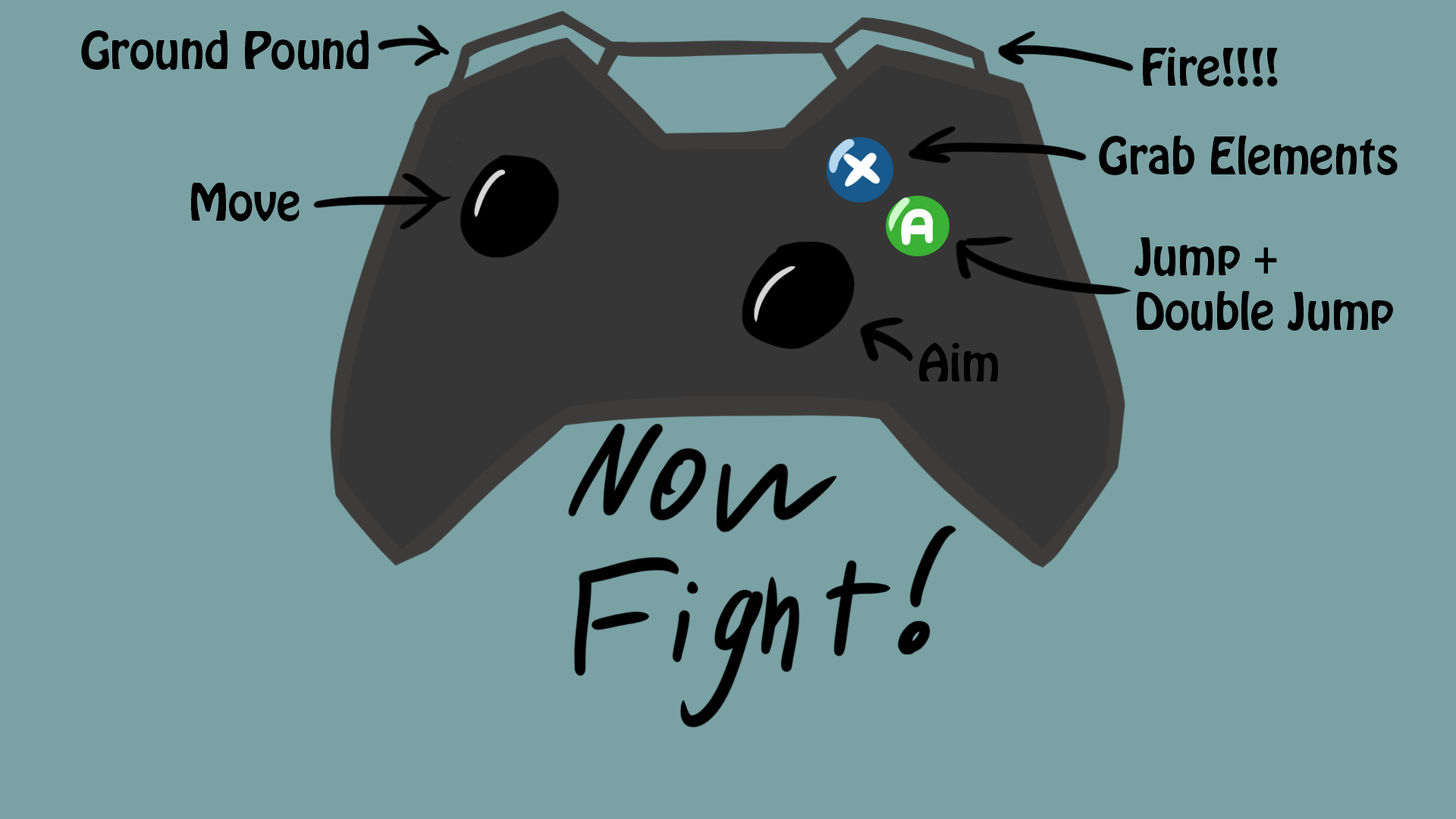
<style>
.page{position:relative;width:1456px;height:819px;background:#7aa2a5}
.page>*{position:absolute;margin:0}
.t1{font:45.5px "HoboStd";color:#000000}
</style>
<div class="page">
<p class="t1" style="left:81px;top:30px;width:288px;height:40px">Ground Pound</p>
<p class="t1" style="left:1143px;top:47px;width:135px;height:39px">Fire!!!!</p>
<p class="t1" style="left:1099px;top:135px;width:299px;height:40px">Grab Elements</p>
<p class="t1" style="left:191px;top:183px;width:109px;height:38px">Move</p>
<p class="t1" style="left:1134px;top:237px;width:259px;height:94px">Jump + <br>Double Jump</p>
<p class="t1" style="left:919px;top:343px;width:79px;height:38px">Aim</p>
</div>
